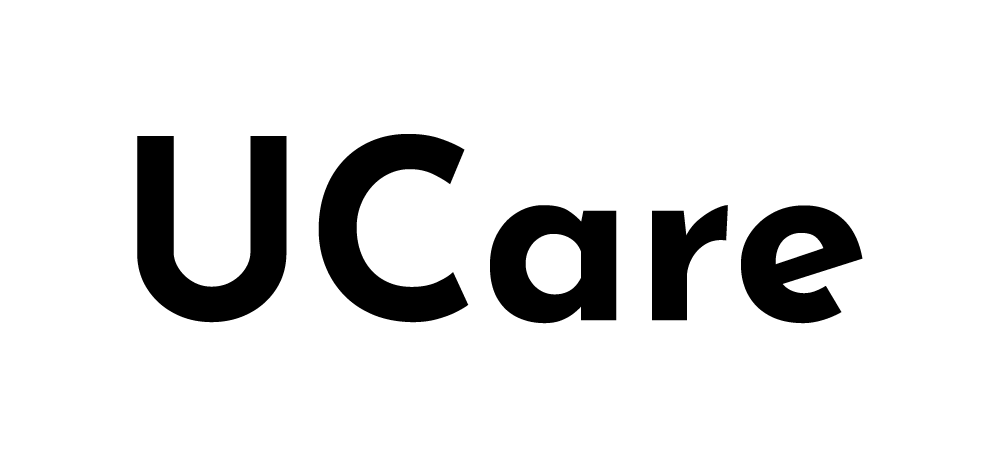
<style>
.page{position:relative;width:1000px;height:457px;background:#ffffff}
.page>*{position:absolute;margin:0}
.t1{font:250px "JosefinSans-Bold";color:#000000}
</style>
<div class="page">
<p class="t1" style="left:137px;top:134px;width:726px;height:190px">UCare</p>
</div>
